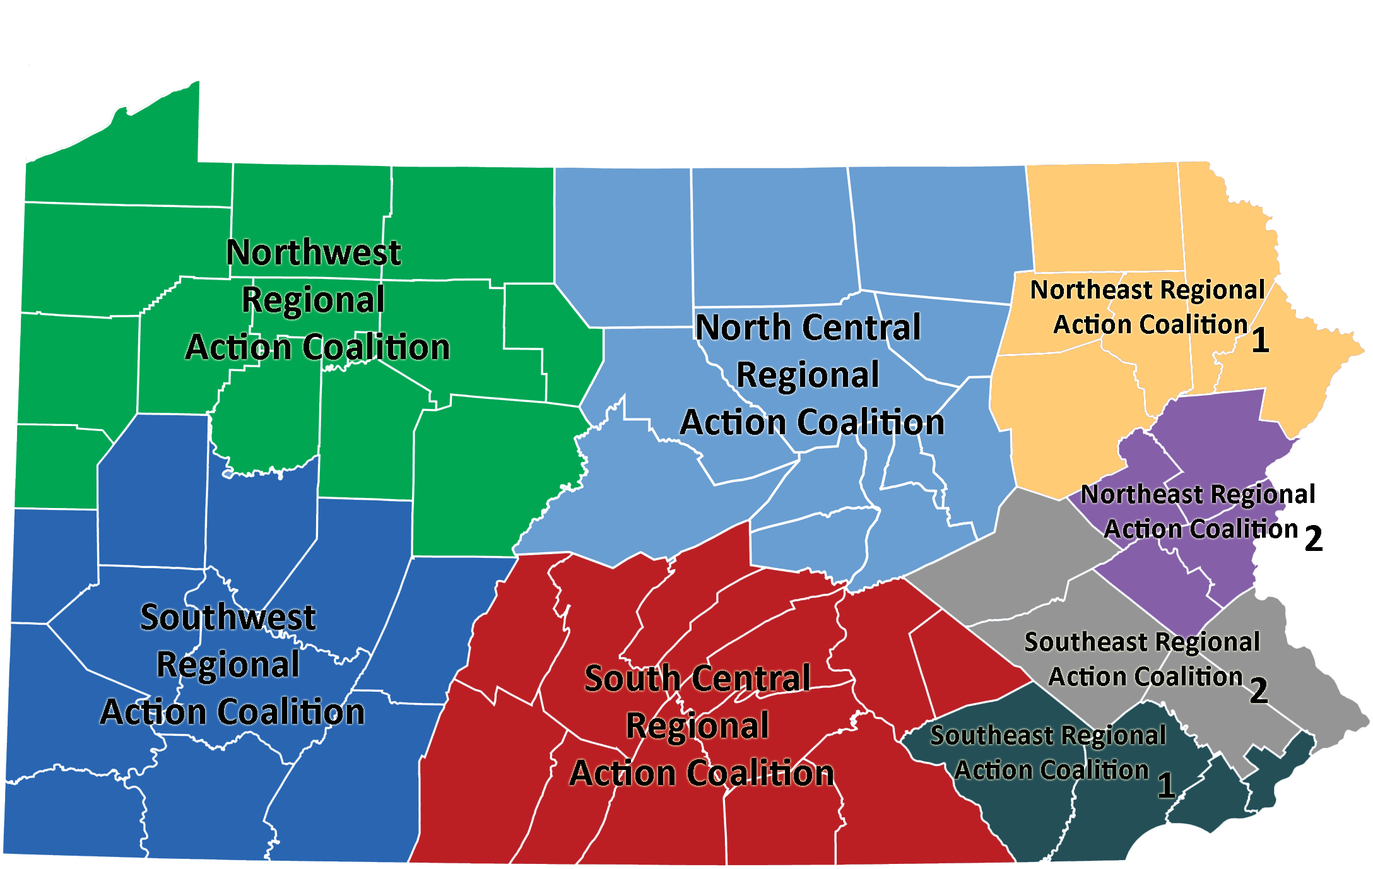
<style>
.page{position:relative;width:1373px;height:869px;background:#ffffff}
.page>*{position:absolute;margin:0}
.t1{font:28.9px "Calibri-Bold";letter-spacing:0.01em;color:#000000}
.t2{font:39.4px "Calibri-Bold";letter-spacing:0.01em;color:#000000}
</style>
<div class="page">
<p class="t1" style="left:1031px;top:279px;width:233px;height:55px;text-align:center">Northeast Regional <br>Action Coalition</p>
<p class="t2" style="left:679px;top:312px;width:264px;height:123px;text-align:center">North Central <br>Regional <br>Action Coalition</p>
<p class="t2" style="left:1253px;top:327px;width:16px;height:25px">1</p>
<p class="t1" style="left:1082px;top:483px;width:232px;height:55px;text-align:center">Northeast Regional <br>Action Coalition</p>
<p class="t2" style="left:1305px;top:525px;width:17px;height:26px">2</p>
<p class="t2" style="left:100px;top:602px;width:263px;height:122px;text-align:center">Southwest <br>Regional <br>Action Coalition</p>
<p class="t1" style="left:1025px;top:631px;width:234px;height:55px;text-align:center">Southeast Regional <br>Action Coalition</p>
<p class="t2" style="left:569px;top:663px;width:264px;height:122px;text-align:center">South Central <br>Regional <br>Action Coalition</p>
<p class="t2" style="left:1250px;top:677px;width:17px;height:26px">2</p>
<p class="t1" style="left:931px;top:724px;width:234px;height:55px;text-align:center">Southeast Regional <br>Action Coalition</p>
<p class="t2" style="left:1159px;top:772px;width:16px;height:25px">1</p>
</div>
